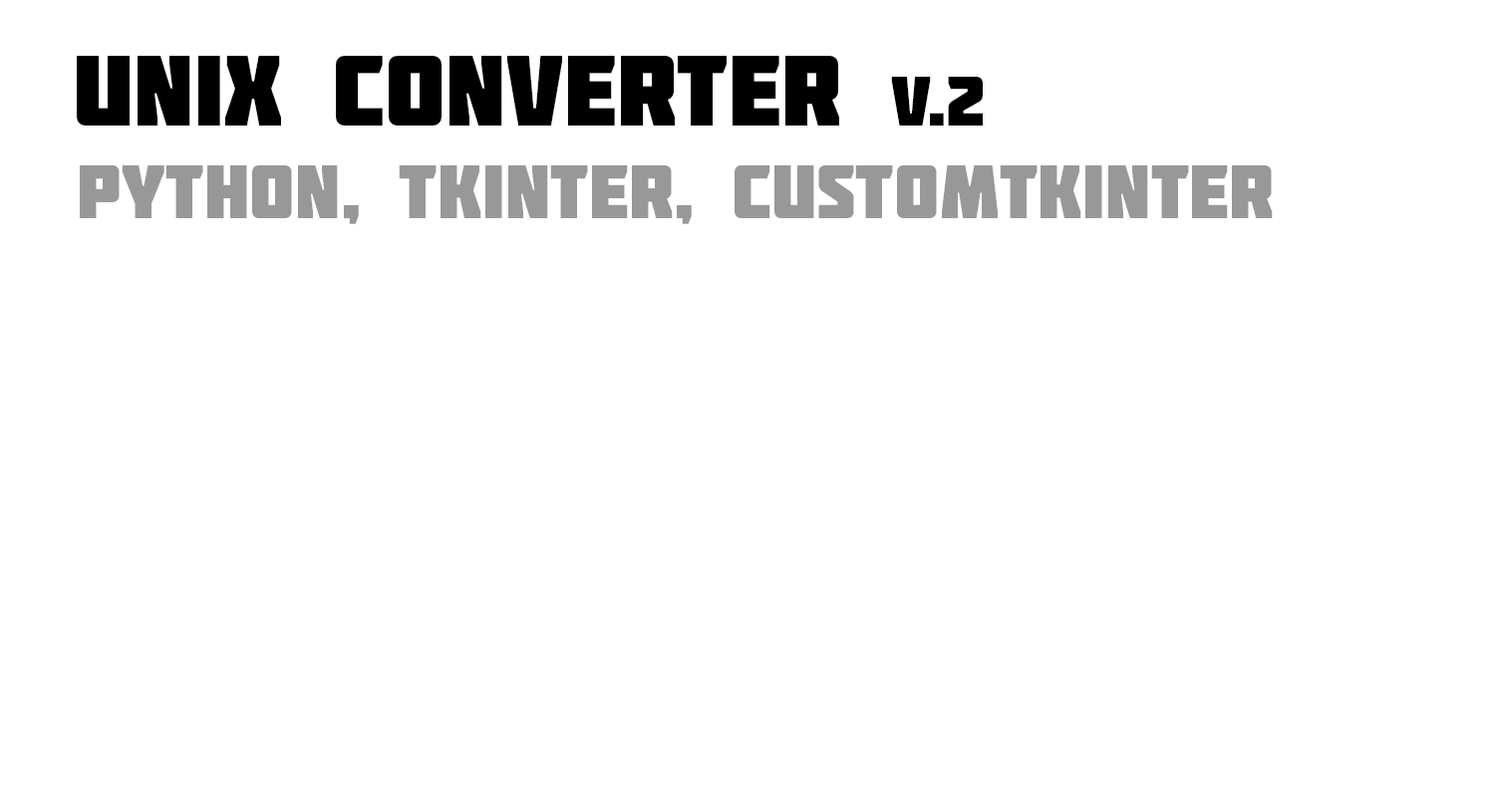
<style>
.page{position:relative;width:1495px;height:797px;background:#ffffff}
.page>*{position:absolute;margin:0}
.t1{font:99.7px "Molot";letter-spacing:0.005em;color:#000000}
.t2{font:69.8px "Molot";letter-spacing:0.005em;color:#000000}
.t3{font:74.8px "Molot";letter-spacing:0.005em;color:#989898}
</style>
<div class="page">
<p class="t1" style="left:77px;top:56px;width:906px;height:70px">UNIX Converter <span class="t2">v.2</span></p>
<p class="t3" style="left:80px;top:165px;width:1193px;height:59px">python, Tkinter, CustomTkinter</p>
</div>
